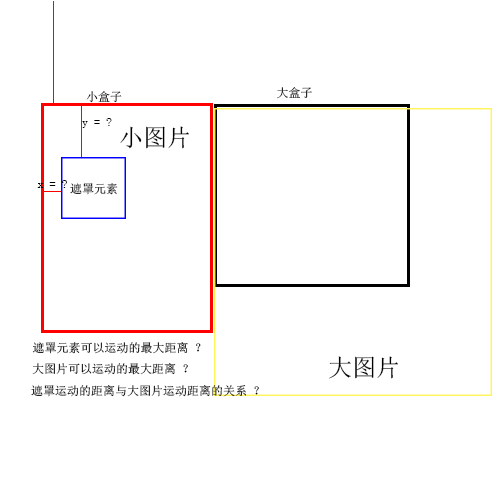
<style>
.page{position:relative;width:500px;height:500px;background:#ffffff}
.page>*{position:absolute;margin:0}
.t1{font:12px "SimSun"}
.t2{font:12px "SimSun";color:#000000}
.t3{font:24px "SimSun";color:#000000}
</style>
<div class="page">
<p class="t1" style="left:277px;top:87px;width:35px;height:12px">大盒子</p>
<p class="t1" style="left:86px;top:91px;width:36px;height:12px">小盒子</p>
<p class="t2" style="left:82px;top:118px;width:30px;height:10px">y = ?</p>
<p class="t3" style="left:120px;top:126px;width:69px;height:23px">小图片</p>
<p class="t2" style="left:37px;top:180px;width:30px;height:8px">x = ?</p>
<p class="t1" style="left:70px;top:183px;width:48px;height:12px">遮罩元素</p>
<p class="t1" style="left:32px;top:342px;width:169px;height:12px">遮罩元素可以运动的最大距离 ？</p>
<p class="t2" style="left:32px;top:363px;width:156px;height:12px">大图片可以运动的最大距离 ？</p>
<p class="t3" style="left:329px;top:356px;width:69px;height:23px">大图片</p>
<p class="t2" style="left:31px;top:385px;width:228px;height:12px">遮罩运动的距离与大图片运动距离的关系 ？</p>
</div>
